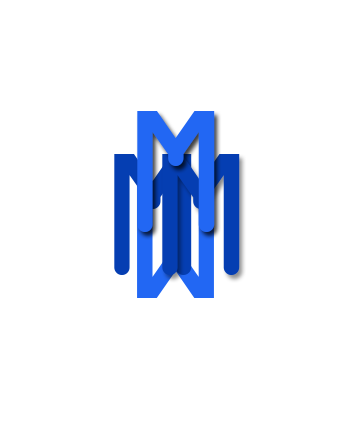
<style>
.page{position:relative;width:353px;height:439px;background:#ffffff}
.page>*{position:absolute;margin:0}
.t1{font:185.8px "OCRAExtended";color:#2267f3}
.t2{font:185.8px "OCRAExtended";color:#053eb2}
</style>
<div class="page">
<p class="t1" style="left:137px;top:111px;width:78px;height:121px">M</p>
<p class="t2" style="left:114px;top:154px;width:78px;height:121px">M</p>
<p class="t2" style="left:162px;top:154px;width:78px;height:121px">M</p>
<p class="t1" style="left:137px;top:177px;width:77px;height:121px;rotate:180deg">M</p>
</div>
